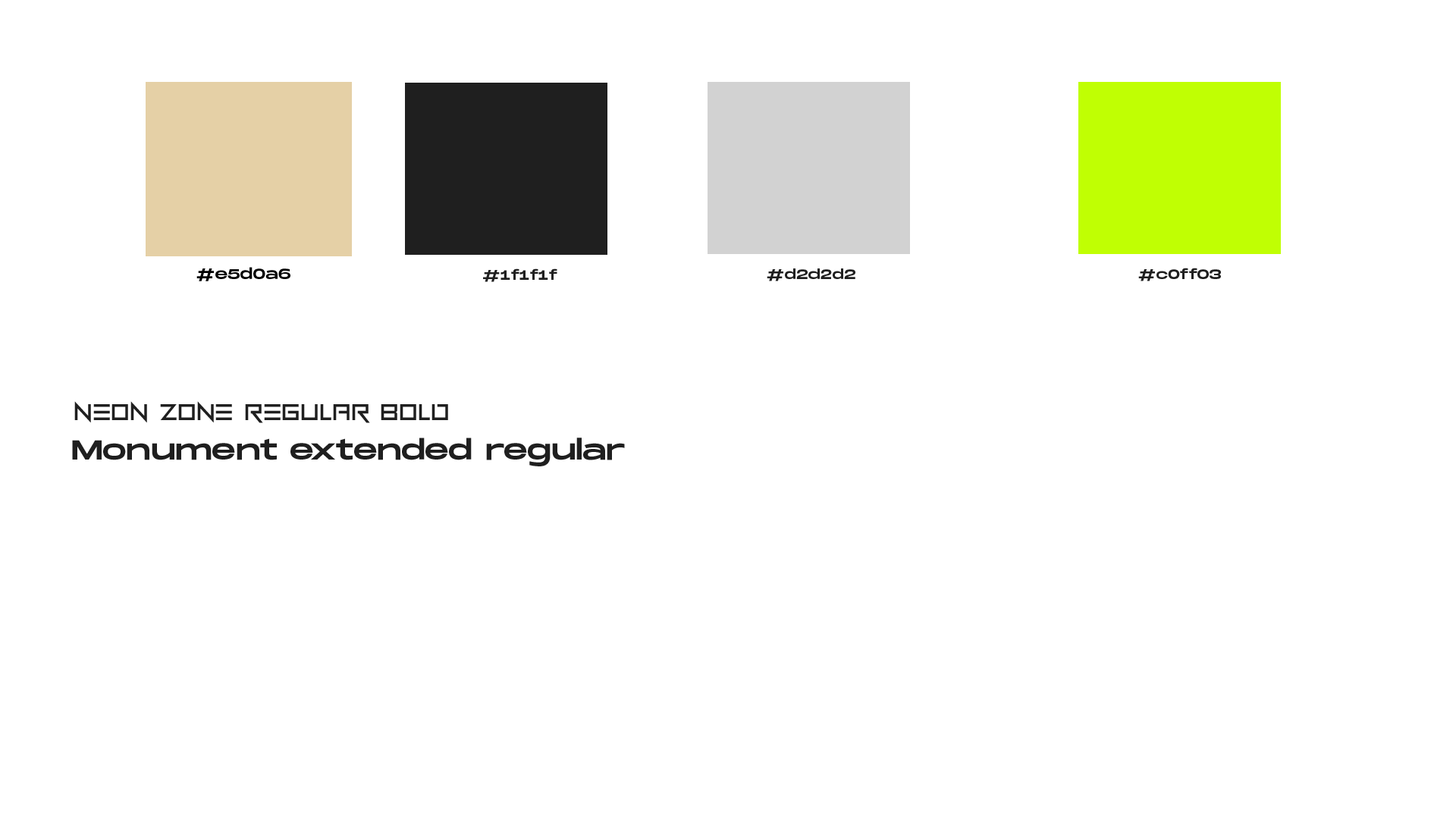
<style>
.page{position:relative;width:1456px;height:819px;background:#ffffff}
.page>*{position:absolute;margin:0}
.t1{font:14.4px "MonumentExtended-Regular";color:#010101}
.t2{font:13.6px "MonumentExtended-Regular";color:#1f1f1f}
.t3{font:27.3px "NeonZone";color:#1f1f1f}
.t4{font:27.3px "MonumentExtended-Regular";color:#1f1f1f}
</style>
<div class="page">
<p class="t1" style="left:196px;top:267px;width:94px;height:14px">#e5d0a6</p>
<p class="t2" style="left:483px;top:268px;width:74px;height:14px">#1f1f1f</p>
<p class="t2" style="left:767px;top:268px;width:88px;height:13px">#d2d2d2</p>
<p class="t2" style="left:1138px;top:268px;width:83px;height:13px">#c0ff03</p>
<p class="t3" style="left:74px;top:401px;width:374px;height:22px">NEON ZONE REGULAR BOLD</p>
<p class="t4" style="left:72px;top:438px;width:553px;height:28px">Monument extended regular</p>
</div>
